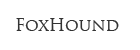
<style>
.page{position:relative;width:140px;height:50px;background:#ffffff}
.page>*{position:absolute;margin:0}
.t1{font:17px "TrajanPro-Regular";color:#333333}
</style>
<div class="page">
<p class="t1" style="left:16px;top:18px;width:103px;height:13px">FoxHound</p>
</div>
